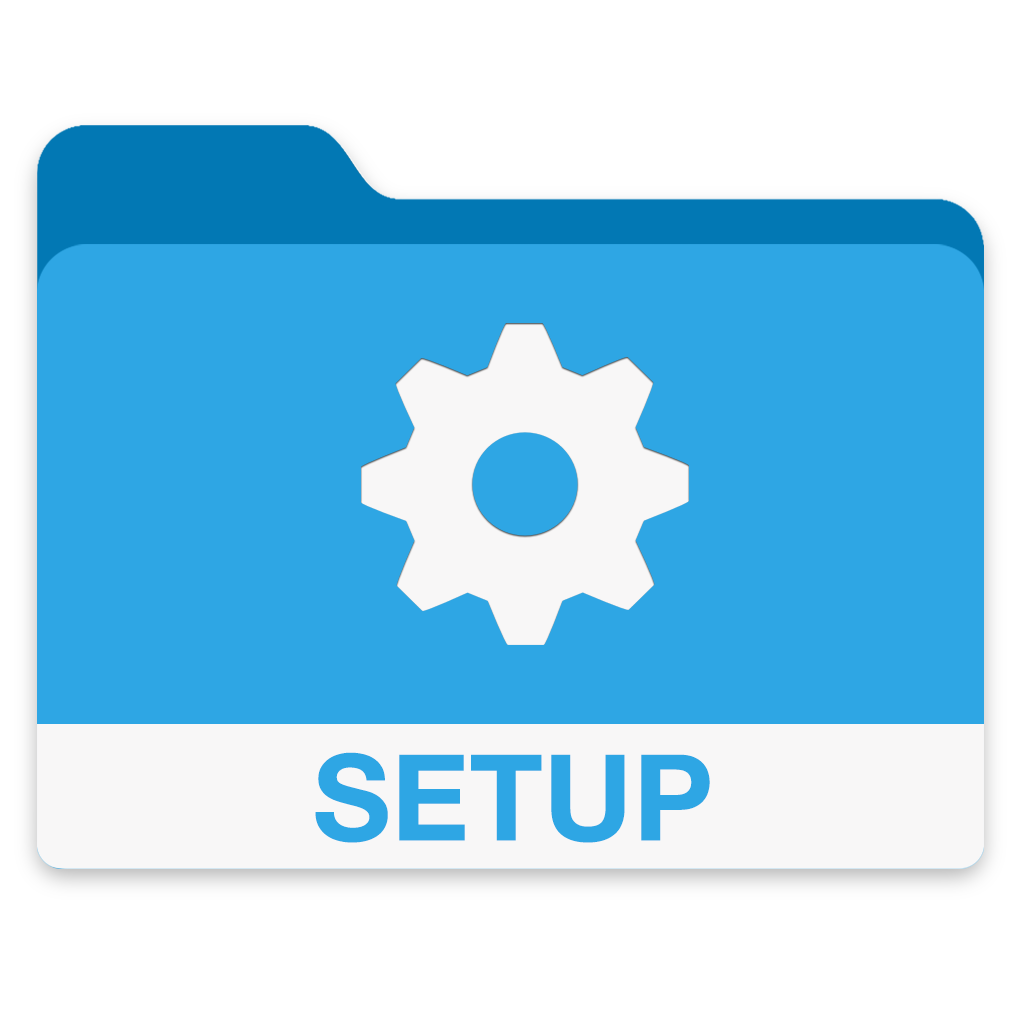
<style>
.page{position:relative;width:1024px;height:1024px;background:#2ea6e4}
.page>*{position:absolute;margin:0}
.t1{font:120px "HelveticaNeue-Bold";letter-spacing:0.005em;color:#2ea6e4}
</style>
<div class="page">
<p class="t1" style="left:315px;top:752px;width:395px;height:91px">SETUP</p>
</div>
